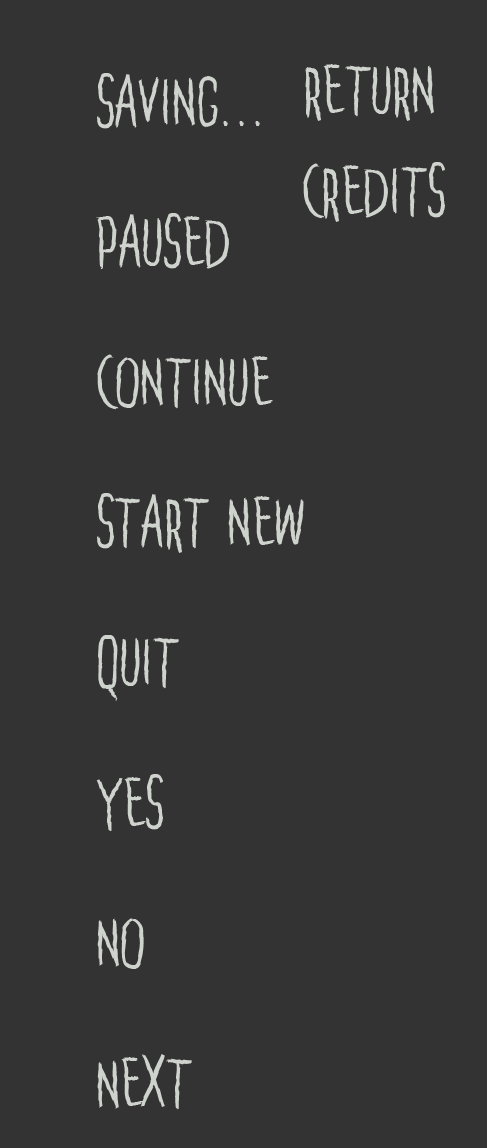
<style>
.page{position:relative;width:487px;height:1148px;background:#333333}
.page>*{position:absolute;margin:0}
.t1{font:58.4px "Penakut";color:#cfd3cd}
</style>
<div class="page">
<p class="t1" style="left:305px;top:64px;width:129px;height:57px">return</p>
<p class="t1" style="left:96px;top:73px;width:208px;height:1037px">Saving...<br><br>Paused<br><br>Continue<br><br>Start new<br><br>Quit<br><br>Yes<br><br>no<br><br>Next</p>
<p class="t1" style="left:303px;top:162px;width:142px;height:60px">credits</p>
</div>
